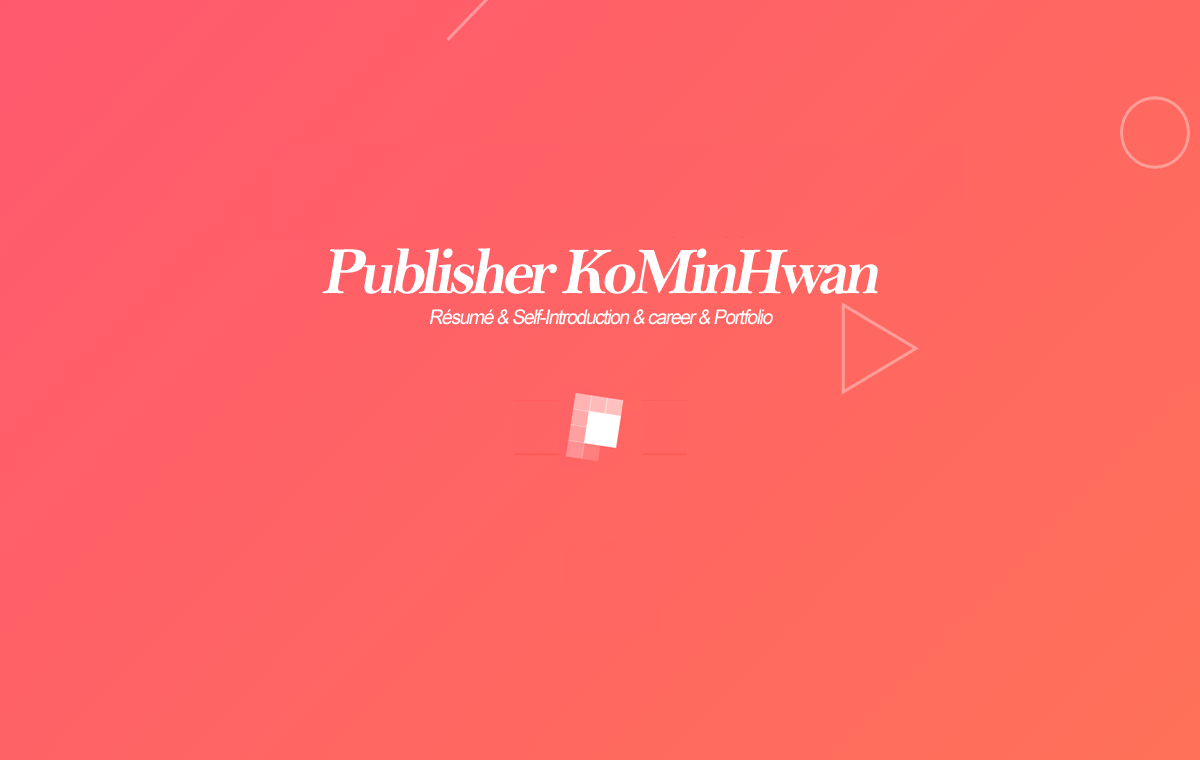
<style>
.page{position:relative;width:1200px;height:760px}
.page>*{position:absolute;margin:0}
.t1{font:67px "BellMTBold";letter-spacing:-0.075em;color:#ffffff;font-style:italic;scale:0.97 1}
.t2{font:20px "ArialMT";letter-spacing:-0.075em;color:#ffffff;font-style:italic;scale:0.97 1}
</style>
<div class="page">
<p class="t1" style="left:322px;top:248px;width:556px;height:46px">Publisher KoMinHwan</p>
<p class="t2" style="left:430px;top:309px;width:343px;height:16px">Résumé &amp; Self-Introduction &amp; career &amp; Portfolio</p>
</div>
